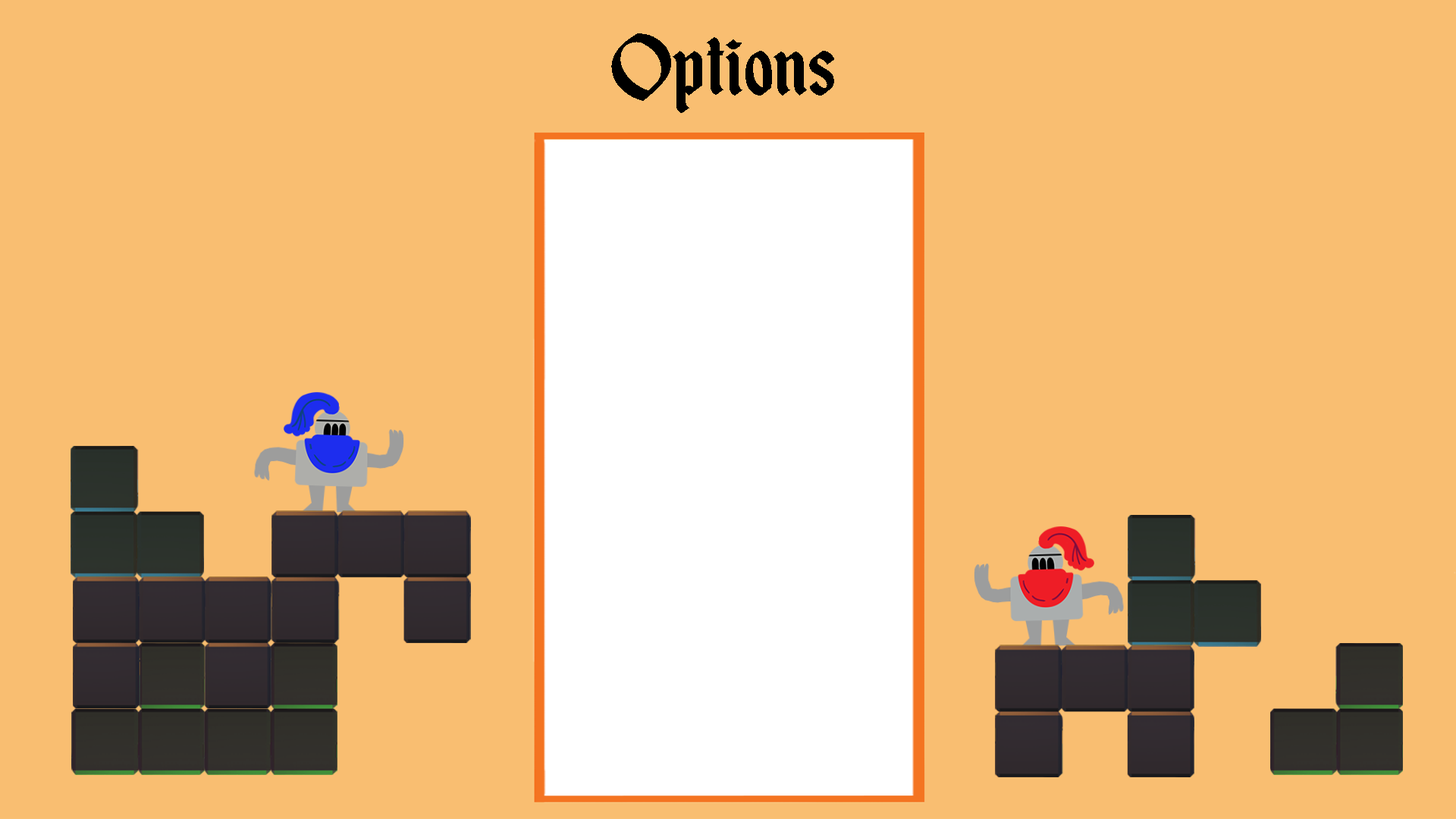
<style>
.page{position:relative;width:1456px;height:819px;background:#f9be71}
.page>*{position:absolute;margin:0}
.t1{font:104.3px "EnchantedLand";color:#000000}
</style>
<div class="page">
<p class="t1" style="left:611px;top:33px;width:223px;height:80px">Options</p>
</div>
